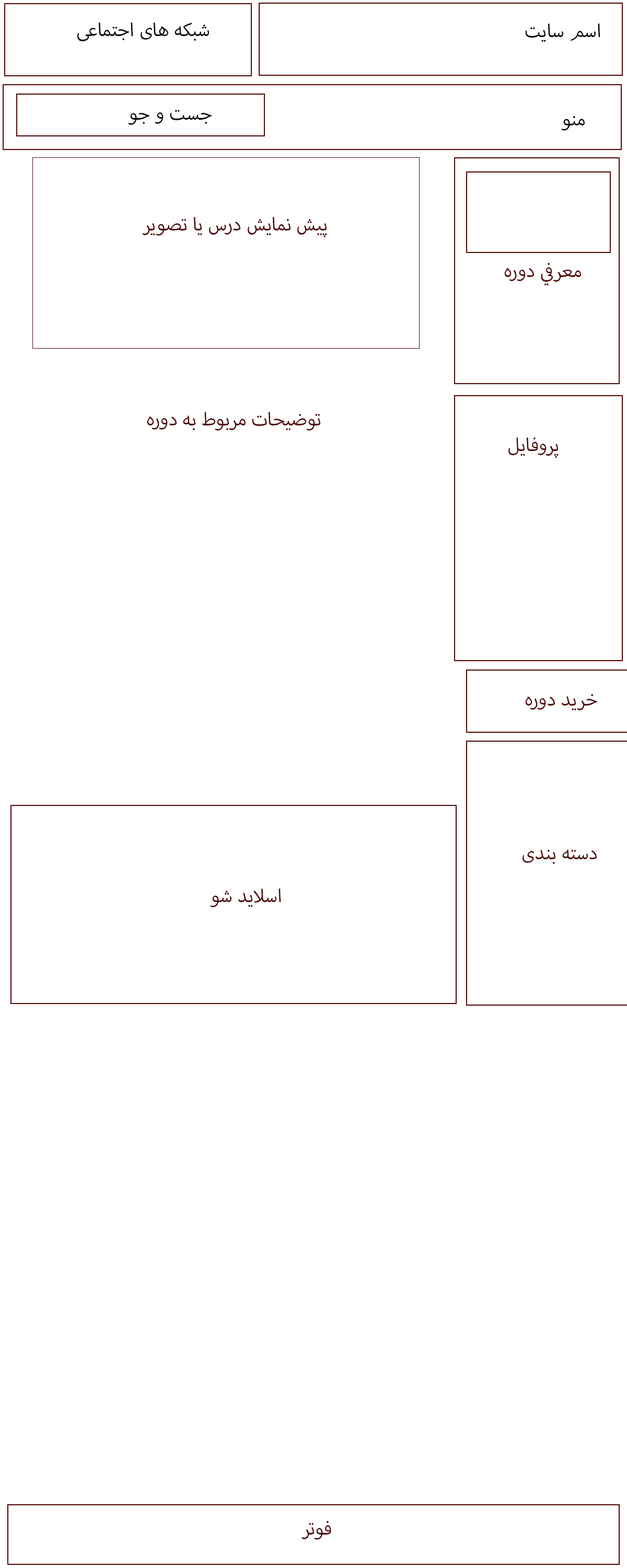
<style>
.page{position:relative;width:627px;height:1568px;background:#ffffff}
.page>*{position:absolute;margin:0}
.t1{font:26.1px "MyriadArabic-Regular";color:#000000}
.t2{font:26.1px "MyriadArabic-Regular";color:#4f0505}
.t3{font:6.3px "MyriadArabic-Regular";color:#4f0505}
</style>
<div class="page">
<p class="t1" style="left:77px;top:22px;width:132px;height:19px">شبکه های اجتماعی</p>
<p class="t1" style="left:525px;top:24px;width:76px;height:18px">اسم سایت</p>
<p class="t1" style="left:128px;top:110px;width:84px;height:15px">جست و جو</p>
<p class="t1" style="left:561px;top:116px;width:24px;height:15px">منو</p>
<p class="t2" style="left:142px;top:217px;width:185px;height:20px">پیش نمایش درس یا تصویر</p>
<p class="t3" style="left:504px;top:263px;width:77px;height:22px;text-align:center">معرفي دوره</p>
<p class="t2" style="left:147px;top:412px;width:173px;height:19px">توضیحات مربوط به دوره</p>
<p class="t2" style="left:509px;top:437px;width:50px;height:21px">پروفایل</p>
<p class="t2" style="left:525px;top:694px;width:72px;height:16px">خرید دوره</p>
<p class="t2" style="left:523px;top:849px;width:74px;height:15px">دسته بندی</p>
<p class="t2" style="left:210px;top:889px;width:71px;height:18px">اسلاید شو</p>
<p class="t2" style="left:302px;top:1521px;width:29px;height:19px">فوتر</p>
</div>
